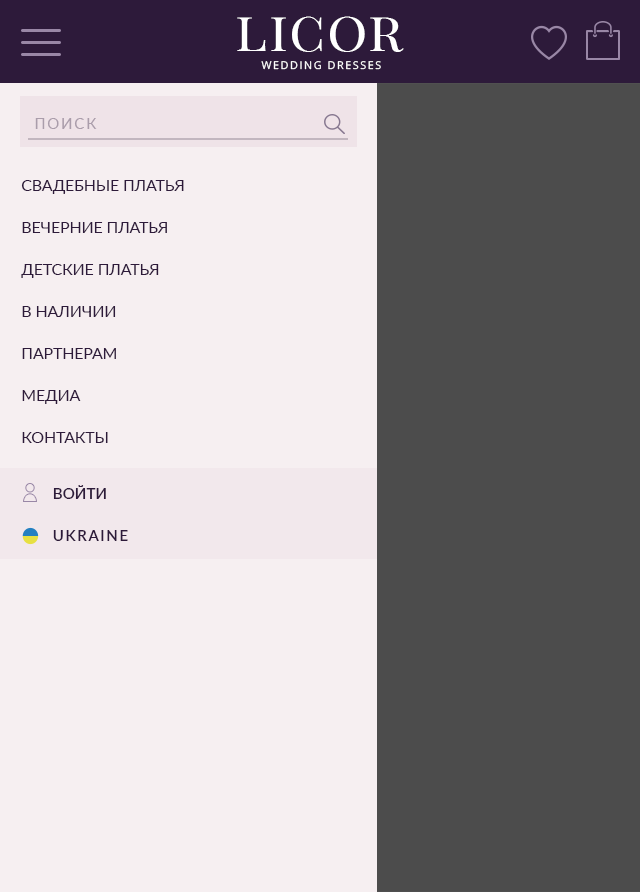
<style>
.page{position:relative;width:640px;height:892px;background:#f6eff1}
.page>*{position:absolute;margin:0}
.t1{font:55.3px "PlayfairDisplaySC-Regular";letter-spacing:0.03em;color:#ffffff}
.t2{font:10.6px "OpenSans";letter-spacing:0.15em;color:#ffffff}
.t3{font:15px "Lato-Regular";letter-spacing:0.12em;color:#aa9dab;text-transform:uppercase}
.t4{font:16px/42px "Lato-Regular";color:#2d1a3a;text-transform:uppercase}
.t5{font:15px "Lato-Semibold";color:#2d1a3a;text-transform:uppercase}
.t6{font:15px "Lato-Semibold";letter-spacing:0.12em;color:#2d1a3a;text-transform:uppercase}
</style>
<div class="page">
<p class="t1" style="left:237px;top:16px;width:167px;height:36px">licor</p>
<p class="t2" style="left:261px;top:61px;width:120px;height:9px">WEDDING DRESSES</p>
<p class="t3" style="left:35px;top:118px;width:62px;height:11px">поиск</p>
<p class="t4" style="left:21px;top:180px;width:163px;height:263px">СВАДЕБНЫЕ платья<br>вечерние платья<br>детские платья<br>в наличии<br>ПАРТНЕРАМ<br>МЕДИА<br>КОНТАКТЫ</p>
<p class="t5" style="left:53px;top:485px;width:53px;height:14px">Войти</p>
<p class="t6" style="left:53px;top:530px;width:75px;height:11px">ukraine</p>
</div>
